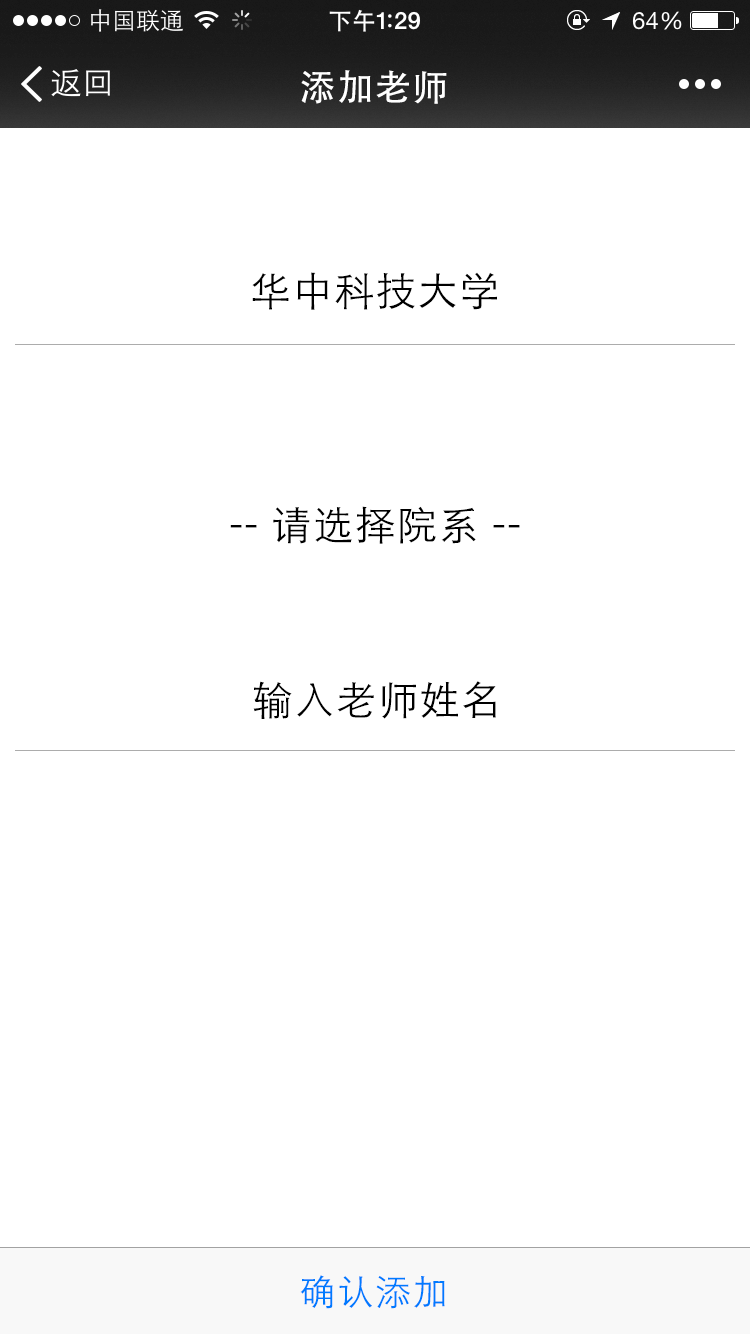
<style>
.page{position:relative;width:750px;height:1334px;background:#ffffff}
.page>*{position:absolute;margin:0}
.t1{font:36px "STHeiti";letter-spacing:0.045em;color:#ffffff}
.t2{font:40px "STXihei";letter-spacing:0.045em;color:#000000}
.t3{font:36px "STXihei";letter-spacing:0.045em;color:#007aff}
</style>
<div class="page">
<p class="t1" style="left:301px;top:70px;width:146px;height:34px">添加老师</p>
<p class="t2" style="left:252px;top:272px;width:245px;height:38px">华中科技大学</p>
<p class="t2" style="left:230px;top:506px;width:290px;height:38px">-- 请选择院系 --</p>
<p class="t2" style="left:253px;top:681px;width:243px;height:38px">输入老师姓名</p>
<p class="t3" style="left:300px;top:1275px;width:145px;height:34px">确认添加</p>
</div>
